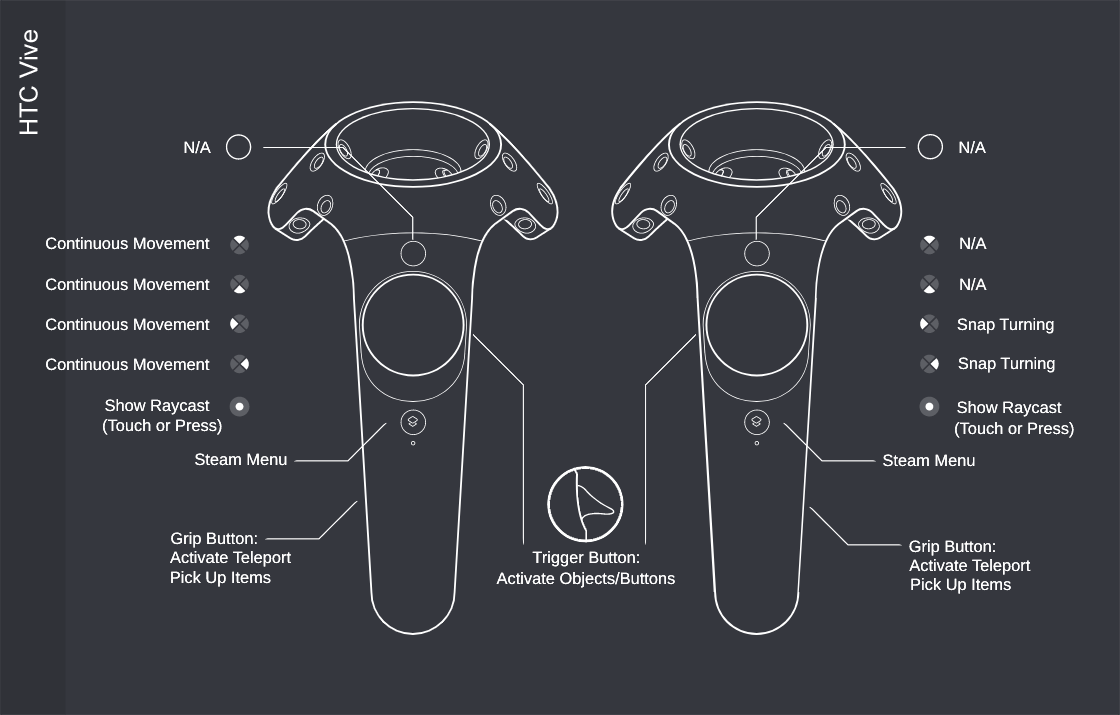
<style>
.page{position:relative;width:1120px;height:715px;background:#35373e}
.page>*{position:absolute;margin:0}
.t1{font:25px "ArialMT";color:#ffffff}
.t2{font:16.4px "ArialMT";color:#ffffff}
</style>
<div class="page">
<p class="t1" style="left:19px;top:30px;width:19px;height:104px;rotate:-90deg">HTC Vive</p>
<p class="t2" style="left:184px;top:141px;width:27px;height:13px">N/A</p>
<p class="t2" style="left:184px;top:141px;width:27px;height:13px">N/A</p>
<p class="t2" style="left:959px;top:141px;width:27px;height:13px">N/A</p>
<p class="t2" style="left:959px;top:141px;width:27px;height:13px">N/A</p>
<p class="t2" style="left:46px;top:237px;width:164px;height:13px">Continuous Movement</p>
<p class="t2" style="left:46px;top:237px;width:164px;height:13px">Continuous Movement</p>
<p class="t2" style="left:960px;top:237px;width:27px;height:13px">N/A</p>
<p class="t2" style="left:960px;top:237px;width:27px;height:13px">N/A</p>
<p class="t2" style="left:46px;top:278px;width:164px;height:13px">Continuous Movement</p>
<p class="t2" style="left:46px;top:278px;width:164px;height:13px">Continuous Movement</p>
<p class="t2" style="left:960px;top:278px;width:27px;height:13px">N/A</p>
<p class="t2" style="left:960px;top:278px;width:27px;height:13px">N/A</p>
<p class="t2" style="left:46px;top:318px;width:164px;height:13px">Continuous Movement</p>
<p class="t2" style="left:46px;top:318px;width:164px;height:13px">Continuous Movement</p>
<p class="t2" style="left:957px;top:318px;width:97px;height:16px">Snap Turning</p>
<p class="t2" style="left:957px;top:318px;width:97px;height:16px">Snap Turning</p>
<p class="t2" style="left:46px;top:358px;width:164px;height:13px">Continuous Movement</p>
<p class="t2" style="left:46px;top:358px;width:164px;height:13px">Continuous Movement</p>
<p class="t2" style="left:958px;top:357px;width:97px;height:16px">Snap Turning</p>
<p class="t2" style="left:958px;top:357px;width:97px;height:16px">Snap Turning</p>
<p class="t2" style="left:105px;top:399px;width:105px;height:16px">Show Raycast</p>
<p class="t2" style="left:105px;top:399px;width:105px;height:16px">Show Raycast</p>
<p class="t2" style="left:957px;top:401px;width:105px;height:16px">Show Raycast</p>
<p class="t2" style="left:957px;top:401px;width:105px;height:16px">Show Raycast</p>
<p class="t2" style="left:103px;top:419px;width:119px;height:16px">(Touch or Press)</p>
<p class="t2" style="left:103px;top:419px;width:119px;height:16px">(Touch or Press)</p>
<p class="t2" style="left:955px;top:422px;width:119px;height:16px">(Touch or Press)</p>
<p class="t2" style="left:955px;top:422px;width:119px;height:16px">(Touch or Press)</p>
<p class="t2" style="left:195px;top:453px;width:92px;height:13px">Steam Menu</p>
<p class="t2" style="left:195px;top:453px;width:92px;height:13px">Steam Menu</p>
<p class="t2" style="left:883px;top:454px;width:92px;height:13px">Steam Menu</p>
<p class="t2" style="left:883px;top:454px;width:92px;height:13px">Steam Menu</p>
<p class="t2" style="left:171px;top:532px;width:86px;height:16px">Grip Button:</p>
<p class="t2" style="left:171px;top:532px;width:86px;height:16px">Grip Button:</p>
<p class="t2" style="left:909px;top:540px;width:86px;height:16px">Grip Button:</p>
<p class="t2" style="left:909px;top:540px;width:86px;height:16px">Grip Button:</p>
<p class="t2" style="left:170px;top:551px;width:121px;height:16px">Activate Teleport</p>
<p class="t2" style="left:170px;top:551px;width:121px;height:16px">Activate Teleport</p>
<p class="t2" style="left:532px;top:551px;width:107px;height:16px">Trigger Button:</p>
<p class="t2" style="left:532px;top:551px;width:107px;height:16px">Trigger Button:</p>
<p class="t2" style="left:909px;top:559px;width:122px;height:16px">Activate Teleport</p>
<p class="t2" style="left:909px;top:559px;width:122px;height:16px">Activate Teleport</p>
<p class="t2" style="left:171px;top:571px;width:100px;height:16px">Pick Up Items</p>
<p class="t2" style="left:171px;top:571px;width:100px;height:16px">Pick Up Items</p>
<p class="t2" style="left:496px;top:572px;width:179px;height:16px">Activate Objects/Buttons</p>
<p class="t2" style="left:496px;top:572px;width:179px;height:16px">Activate Objects/Buttons</p>
<p class="t2" style="left:911px;top:578px;width:100px;height:16px">Pick Up Items</p>
<p class="t2" style="left:911px;top:578px;width:100px;height:16px">Pick Up Items</p>
</div>
